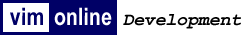
<style>
.page{position:relative;width:244px;height:35px;background:#ffffff}
.page>*{position:absolute;margin:0}
.t1{font:24px "ArialNarrow-Bold";color:#000066}
.t2{font:24px "ArialNarrow-Bold";color:#ffffff}
.t3{font:18px "CourierNewPS-BoldItalicMT";color:#000000}
</style>
<div class="page">
<p class="t1" style="left:10px;top:7px;width:33px;height:18px">vim</p>
<p class="t2" style="left:54px;top:7px;width:58px;height:19px">online</p>
<p class="t3" style="left:123px;top:14px;width:118px;height:15px">Development</p>
</div>
